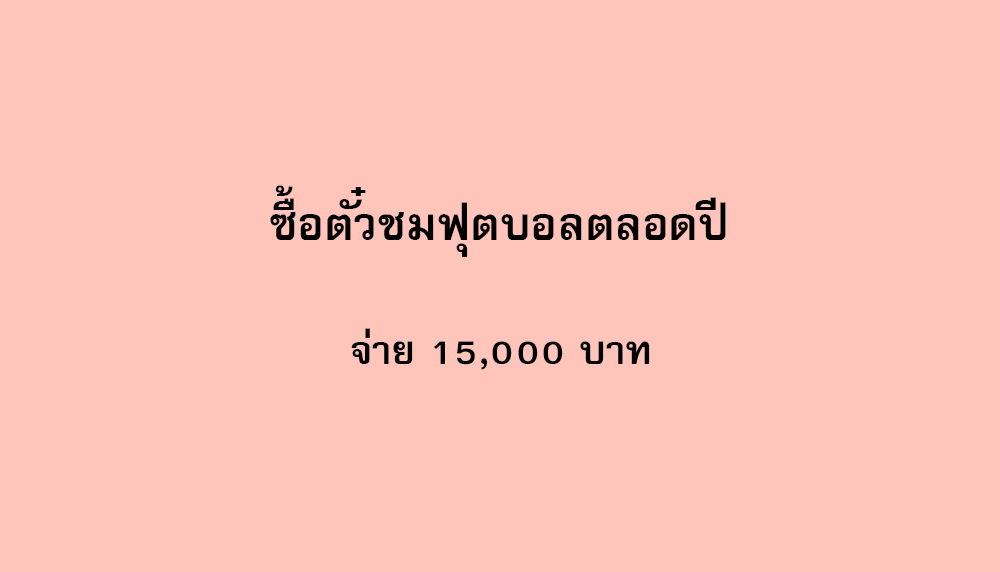
<style>
.page{position:relative;width:1000px;height:572px;background:#ffc4ba}
.page>*{position:absolute;margin:0}
.t1{font:64px "FreesiaUPCBold";color:#000000}
.t2{font:56px "FreesiaUPCBold";color:#000000}
</style>
<div class="page">
<p class="t1" style="left:270px;top:185px;width:456px;height:72px">ซื้อตั๋วชมฟุตบอลตลอดปี</p>
<p class="t2" style="left:351px;top:328px;width:299px;height:42px">จ่าย 15,000 บาท</p>
</div>
